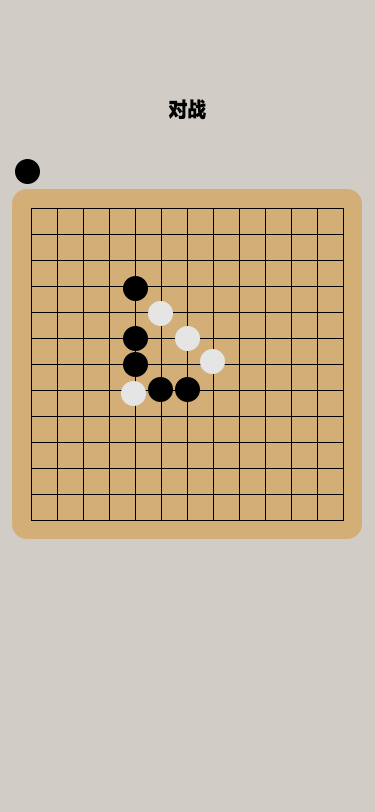
<style>
.page{position:relative;width:375px;height:812px;background:#d2ccc7}
.page>*{position:absolute;margin:0}
.t1{font:21.2px "FZLTTHK--GBK1-0";color:#000000;scale:0.89 1}
</style>
<div class="page">
<p class="t1" style="left:168px;top:99px;width:38px;height:21px">对战</p>
</div>
